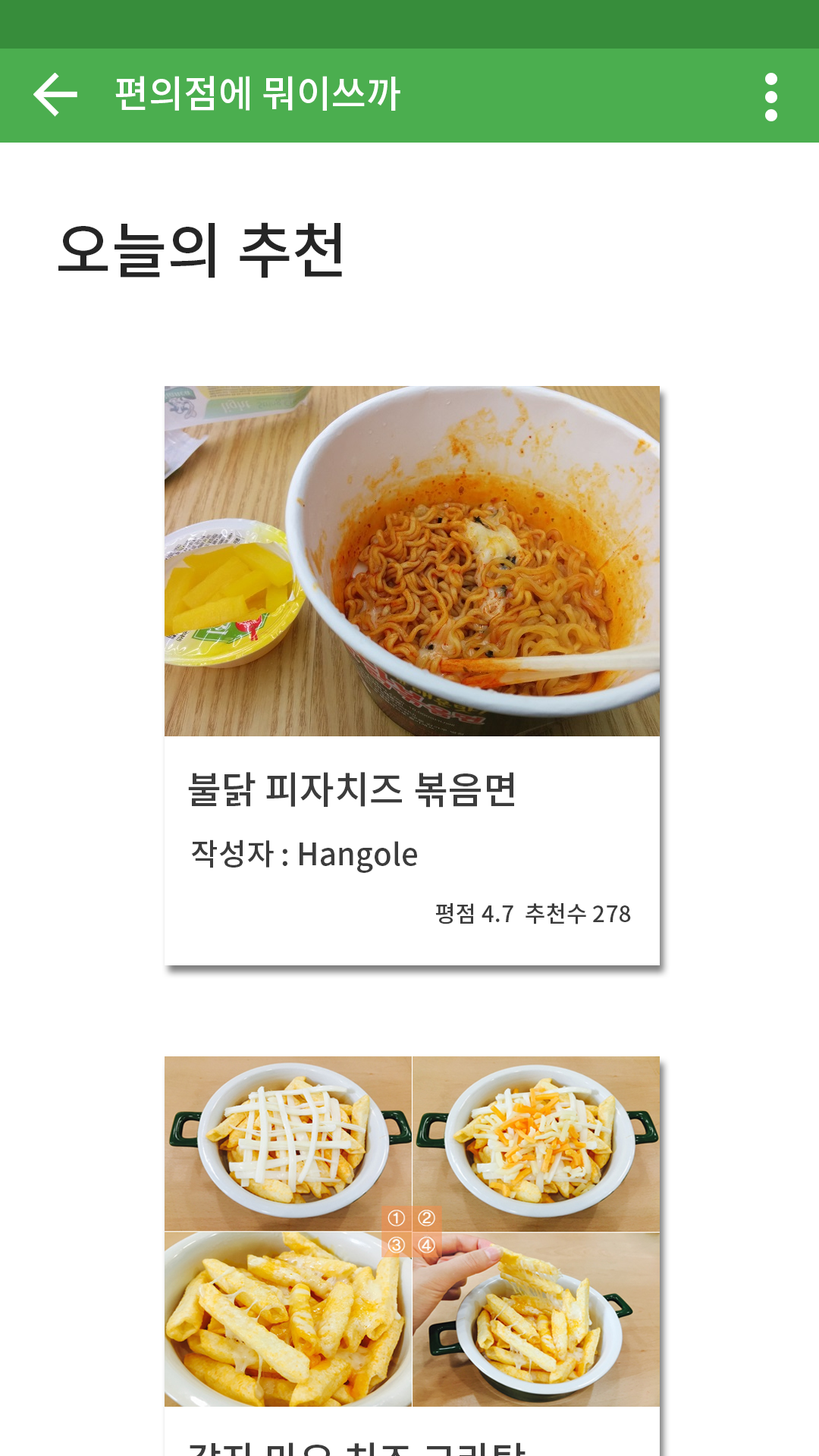
<style>
.page{position:relative;width:819px;height:1456px;background:#ffffff}
.page>*{position:absolute;margin:0}
.t1{font:37.9px "NotoSansCJKkr-Medium";color:#ffffff}
.t2{font:60.7px "NotoSansCJKkr-Medium";color:#252525}
.t3{font:37.9px "NotoSansCJKkr-Medium";color:#3c3c3c}
.t4{font:30.3px "NotoSansCJKkr-Medium";color:#3c3c3c}
.t5{font:22.7px "NotoSansCJKkr-Medium";color:#3c3c3c}
</style>
<div class="page">
<p class="t1" style="left:115px;top:76px;width:285px;height:35px">편의점에 뭐이쓰까</p>
<p class="t2" style="left:58px;top:222px;width:284px;height:56px">오늘의 추천</p>
<p class="t3" style="left:188px;top:772px;width:326px;height:36px">불닭 피자치즈 볶음면</p>
<p class="t4" style="left:191px;top:839px;width:226px;height:34px">작성자 : Hangole</p>
<p class="t5" style="left:435px;top:903px;width:196px;height:21px">평점 4.7  추천수 278</p>
</div>
